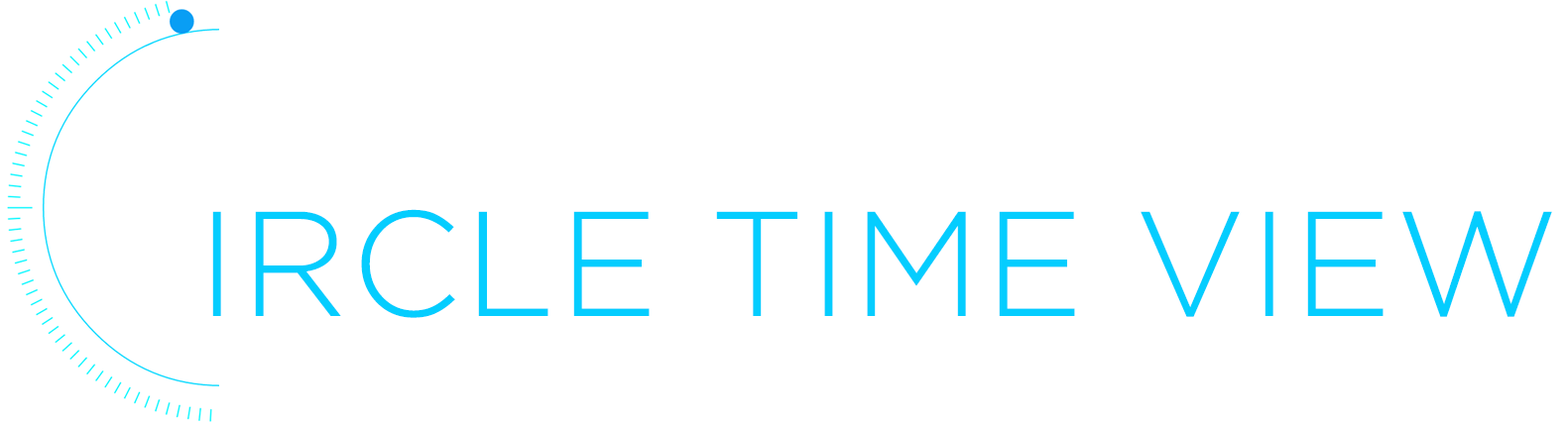
<style>
.page{position:relative;width:1568px;height:422px;background:#ffffff}
.page>*{position:absolute;margin:0}
.t1{font:148.8px "GothamPro-Light";letter-spacing:0.02em;color:#04cdff;text-transform:uppercase}
</style>
<div class="page">
<p class="t1" style="left:212px;top:209px;width:1340px;height:109px">IRCLE TIME VIEW</p>
</div>
